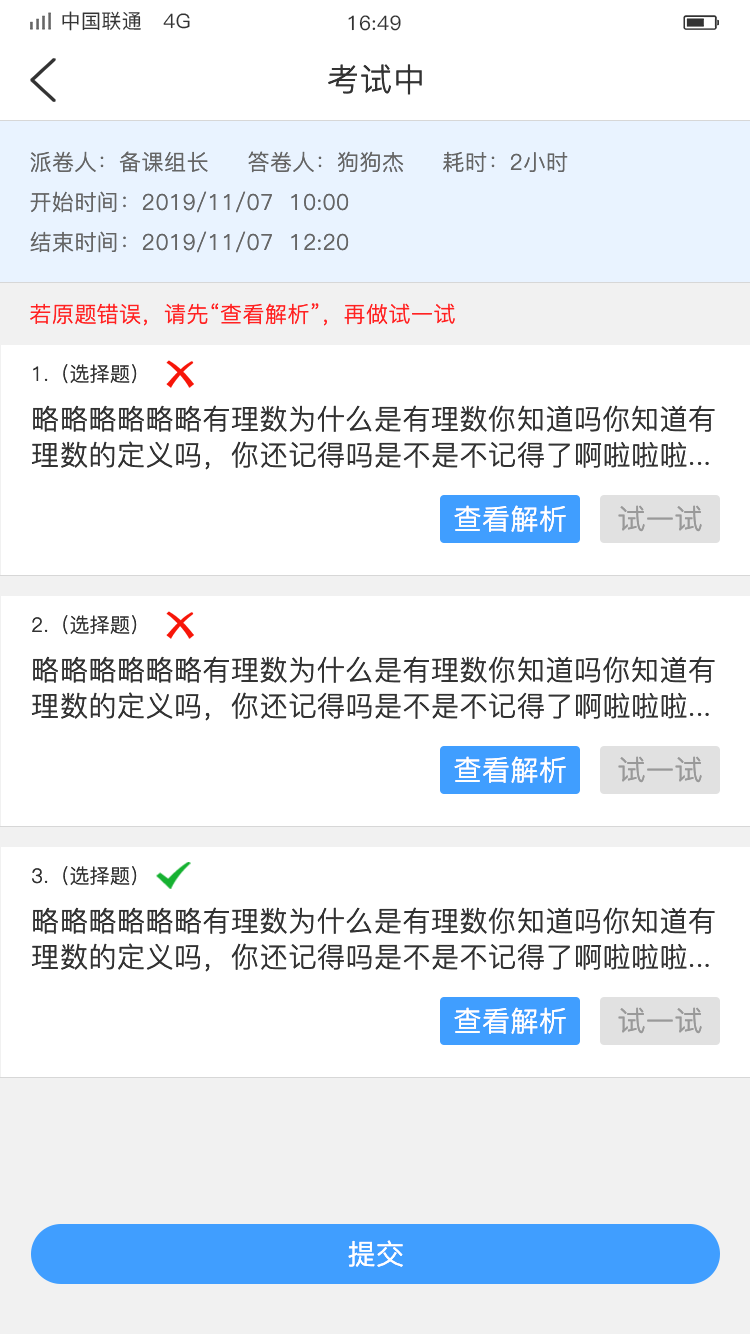
<style>
.page{position:relative;width:750px;height:1334px;background:#ffffff}
.page>*{position:absolute;margin:0}
.t1{font:20px "PingFang-SC-Medium";letter-spacing:0.02em;color:#333333}
.t2{font:32px "PingFang-SC-Regular";letter-spacing:0.02em;color:#333333}
.t3{font:22px "PingFang-SC-Regular";letter-spacing:0.02em;color:#666666}
.t4{font:22px "PingFang-SC-Regular";letter-spacing:0.02em;color:#ff2323}
.t5{font:20px "PingFang-SC-Regular";letter-spacing:0.02em;color:#333333}
.t6{font:28px/36px "PingFang-SC-Regular";letter-spacing:0.02em;color:#333333}
.t7{font:28px "PingFang-SC-Regular";letter-spacing:0.02em;color:#ffffff}
.t8{font:28px "PingFang-SC-Regular";letter-spacing:0.02em;color:#999999}
</style>
<div class="page">
<p class="t1" style="left:62px;top:11px;width:128px;height:20px">中国联通   4G</p>
<p class="t1" style="left:348px;top:15px;width:53px;height:16px">16:49</p>
<p class="t2" style="left:328px;top:64px;width:94px;height:31px">考试中</p>
<p class="t3" style="left:30px;top:151px;width:178px;height:22px">派卷人：备课组长</p>
<p class="t3" style="left:248px;top:151px;width:156px;height:22px">答卷人：狗狗杰</p>
<p class="t3" style="left:443px;top:151px;width:125px;height:22px">耗时：2小时</p>
<p class="t3" style="left:30px;top:191px;width:319px;height:22px">开始时间：2019/11/07  10:00</p>
<p class="t3" style="left:30px;top:231px;width:319px;height:22px">结束时间：2019/11/07  12:20</p>
<p class="t4" style="left:30px;top:303px;width:425px;height:23px">若原题错误，请先“查看解析”，再做试一试</p>
<p class="t5" style="left:33px;top:364px;width:104px;height:20px">1.（选择题）</p>
<p class="t6" style="left:31px;top:405px;width:684px;height:65px">略略略略略略有理数为什么是有理数你知道吗你知道有理数的定义吗，你还记得吗是不是不记得了啊啦啦啦...</p>
<p class="t7" style="left:454px;top:505px;width:112px;height:27px">查看解析</p>
<p class="t8" style="left:618px;top:505px;width:84px;height:27px">试一试</p>
<p class="t5" style="left:32px;top:615px;width:105px;height:20px">2.（选择题）</p>
<p class="t6" style="left:31px;top:656px;width:684px;height:65px">略略略略略略有理数为什么是有理数你知道吗你知道有理数的定义吗，你还记得吗是不是不记得了啊啦啦啦...</p>
<p class="t7" style="left:454px;top:756px;width:112px;height:27px">查看解析</p>
<p class="t8" style="left:618px;top:756px;width:84px;height:27px">试一试</p>
<p class="t5" style="left:32px;top:866px;width:105px;height:20px">3.（选择题）</p>
<p class="t6" style="left:31px;top:907px;width:684px;height:65px">略略略略略略有理数为什么是有理数你知道吗你知道有理数的定义吗，你还记得吗是不是不记得了啊啦啦啦...</p>
<p class="t7" style="left:454px;top:1007px;width:112px;height:27px">查看解析</p>
<p class="t8" style="left:618px;top:1007px;width:84px;height:27px">试一试</p>
<p class="t7" style="left:348px;top:1240px;width:55px;height:27px">提交</p>
</div>
